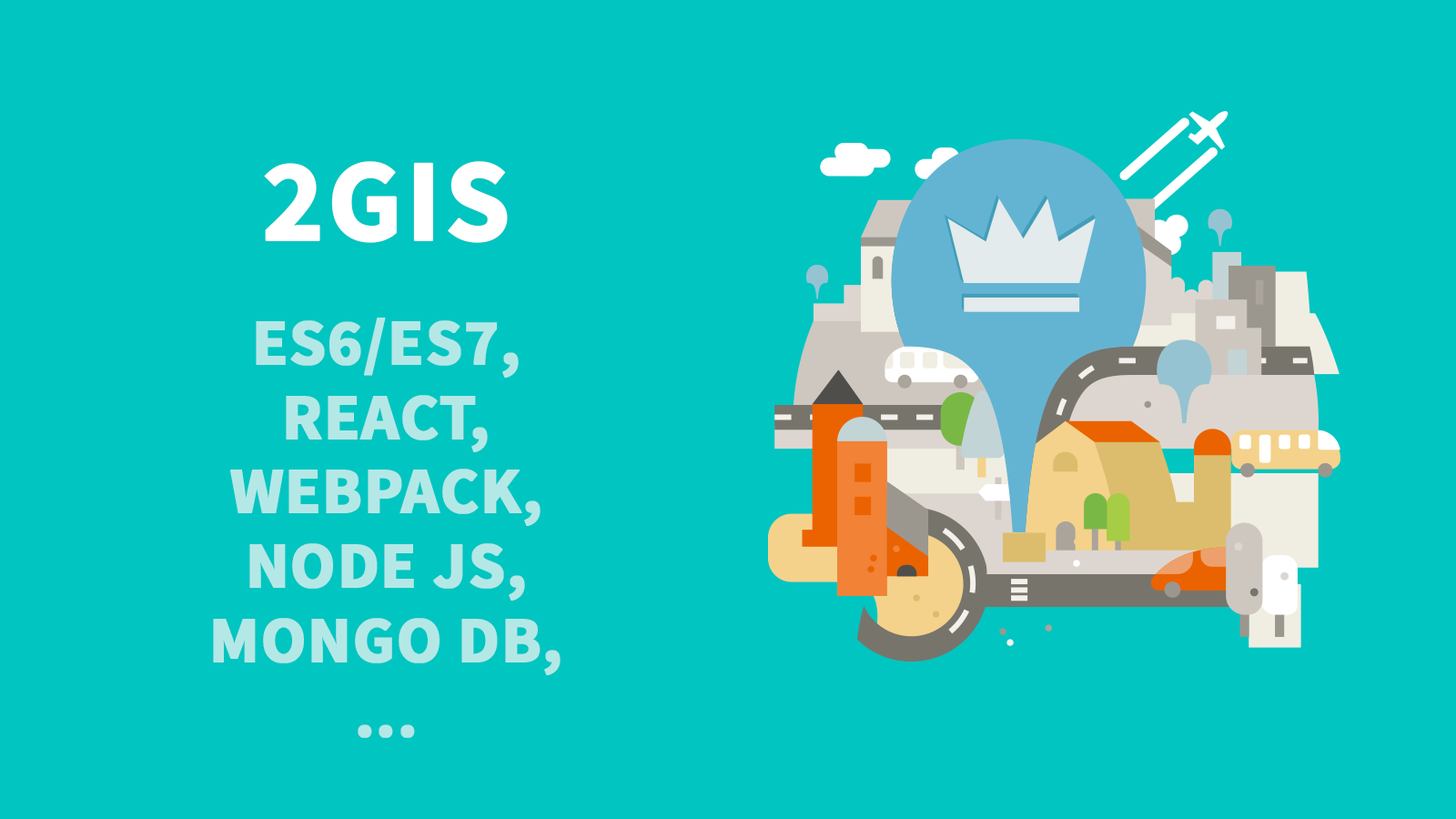
<style>
.page{position:relative;width:1456px;height:819px;background:#01c5c1}
.page>*{position:absolute;margin:0}
.t1{font:117.8px "SourceSansPro-Bold";color:#ffffff;text-transform:uppercase;font-weight:bold}
.t2{font:65.5px/65.3px "SourceSansPro-Bold";color:#b4e8e6;text-transform:uppercase;font-weight:bold}
</style>
<div class="page">
<p class="t1" style="left:264px;top:161px;width:244px;height:82px">2GIs</p>
<p class="t2" style="left:213px;top:318px;width:348px;height:420px;text-align:center">es6/es7,<br>react,<br>webpack,<br>node js,<br>mongo db,<br>...</p>
</div>
